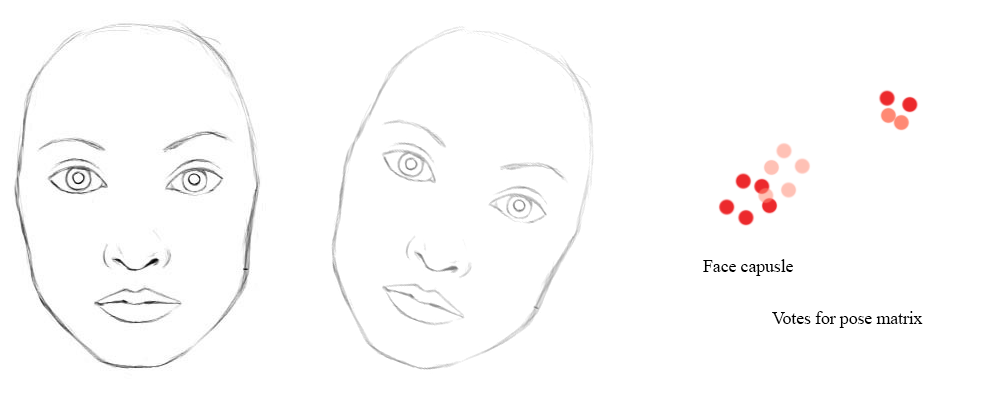
<style>
.page{position:relative;width:992px;height:398px;background:#ffffff}
.page>*{position:absolute;margin:0}
.t1{font:18px "TimesNewRomanPSMT";letter-spacing:-0.01em;color:#000000}
</style>
<div class="page">
<p class="t1" style="left:703px;top:259px;width:90px;height:17px">Face capusle</p>
<p class="t1" style="left:772px;top:311px;width:151px;height:17px">Votes for pose matrix</p>
</div>
